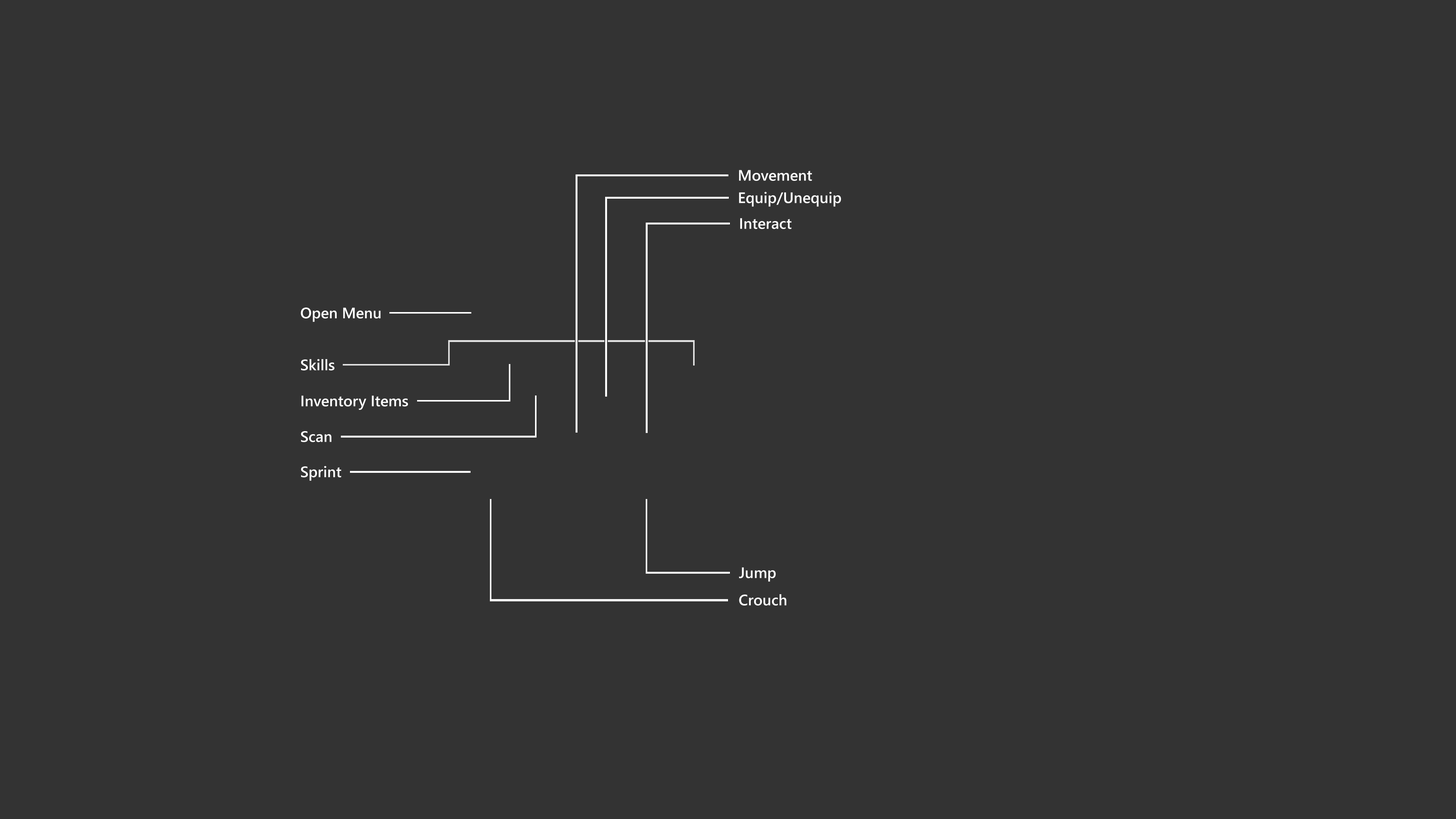
<style>
.page{position:relative;width:1456px;height:819px;background:#333333}
.page>*{position:absolute;margin:0}
.t1{font:15.2px "SegoeUI-Semibold";color:#ffffff}
</style>
<div class="page">
<p class="t1" style="left:739px;top:170px;width:73px;height:11px">Movement</p>
<p class="t1" style="left:739px;top:192px;width:102px;height:15px">Equip/Unequip</p>
<p class="t1" style="left:740px;top:218px;width:52px;height:11px">Interact</p>
<p class="t1" style="left:301px;top:308px;width:80px;height:14px">Open Menu</p>
<p class="t1" style="left:301px;top:359px;width:33px;height:11px">Skills</p>
<p class="t1" style="left:301px;top:395px;width:107px;height:15px">Inventory Items</p>
<p class="t1" style="left:301px;top:431px;width:30px;height:11px">Scan</p>
<p class="t1" style="left:301px;top:466px;width:40px;height:15px">Sprint</p>
<p class="t1" style="left:739px;top:567px;width:37px;height:15px">Jump</p>
<p class="t1" style="left:739px;top:594px;width:47px;height:12px">Crouch</p>
</div>
